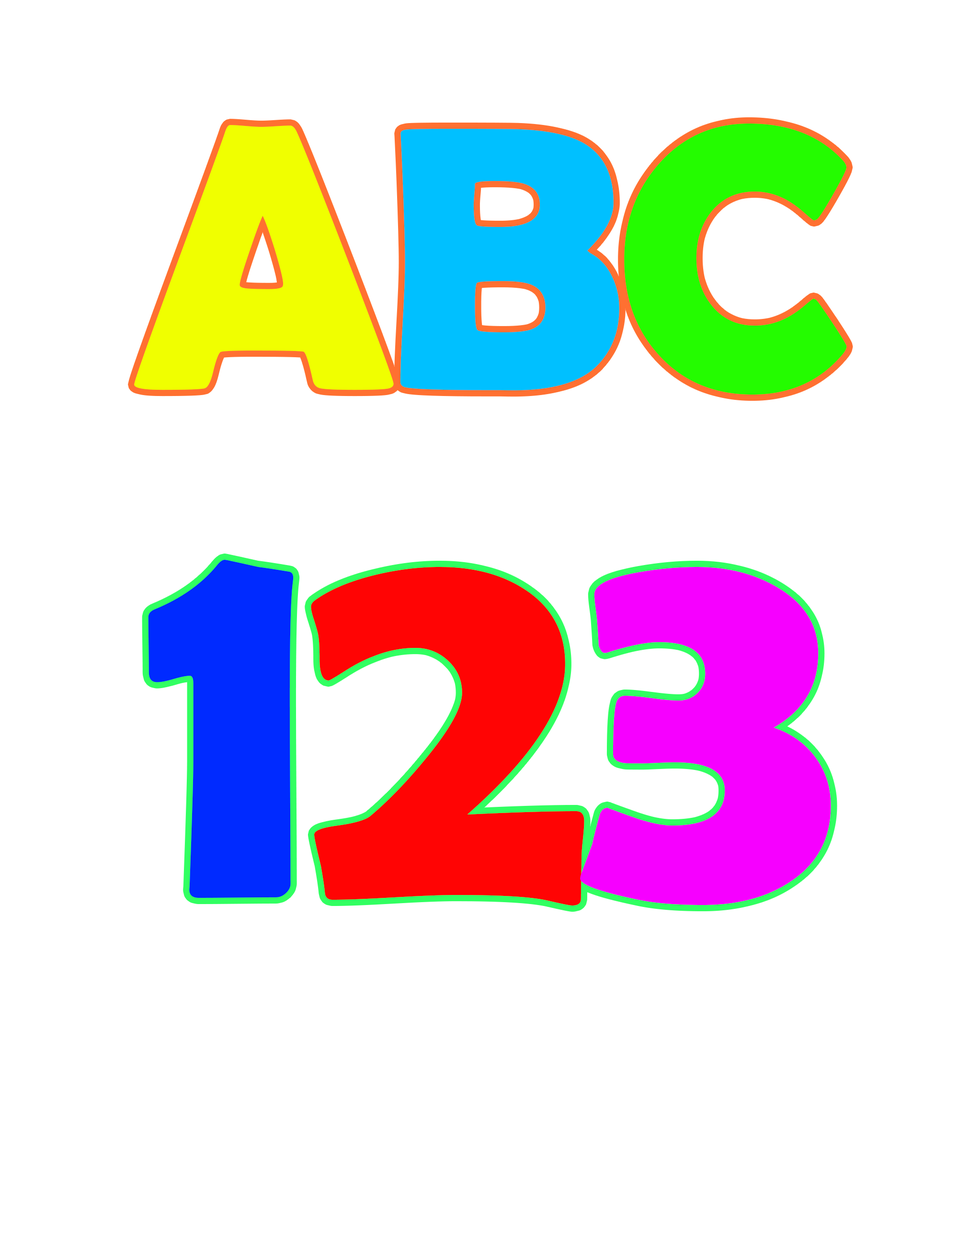
<style>
.page{position:relative;width:958px;height:1245px;background:#ffffff}
.page>*{position:absolute;margin:0}
.t1{font:377.8px "BerlinSansFBDemi-Bold";letter-spacing:-0.03em;color:#f0ff00}
.t2{font:377.8px "BerlinSansFBDemi-Bold";letter-spacing:-0.03em;color:#00c0ff}
.t3{font:377.8px "BerlinSansFBDemi-Bold";letter-spacing:-0.03em;color:#24fc00}
.t4{font:548.5px "BerlinSansFBDemi-Bold";letter-spacing:-0.03em;color:#002aff}
.t5{font:548.5px "BerlinSansFBDemi-Bold";letter-spacing:-0.03em;color:#ff0404}
.t6{font:548.5px "BerlinSansFBDemi-Bold";letter-spacing:-0.03em;color:#f600ff}
</style>
<div class="page">
<p class="t1" style="left:134px;top:124px;width:713px;height:271px">A<span class="t2">B</span><span class="t3">C</span></p>
<p class="t4" style="left:148px;top:560px;width:683px;height:346px">1<span class="t5">2</span><span class="t6">3</span></p>
</div>
